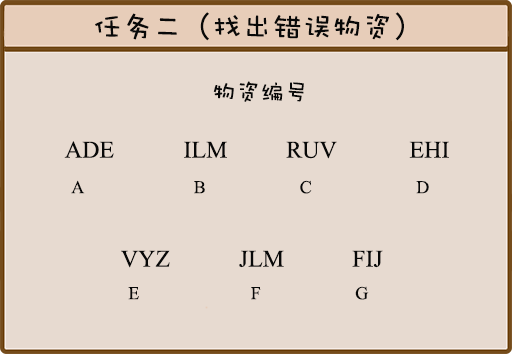
<style>
.page{position:relative;width:512px;height:354px;background:#e7dad0}
.page>*{position:absolute;margin:0}
.t1{font:30px "DFPWaWaW5";color:#080808}
.t2{font:24px "DFPWaWaW5";color:#080808}
.t3{font:24px "TimesNewRomanPSMT";color:#080808}
.t4{font:18px "TimesNewRomanPSMT";color:#080808}
</style>
<div class="page">
<p class="t1" style="left:95px;top:12px;width:309px;height:29px">任务二（找出错误物资）</p>
<p class="t2" style="left:213px;top:81px;width:91px;height:21px">物资编号</p>
<p class="t3" style="left:64px;top:141px;width:50px;height:17px">ADE</p>
<p class="t3" style="left:184px;top:141px;width:43px;height:17px">ILM</p>
<p class="t3" style="left:286px;top:141px;width:51px;height:18px">RUV</p>
<p class="t3" style="left:409px;top:141px;width:40px;height:17px">EHI</p>
<p class="t4" style="left:71px;top:180px;width:14px;height:14px">A</p>
<p class="t4" style="left:194px;top:181px;width:11px;height:13px">B</p>
<p class="t4" style="left:300px;top:180px;width:12px;height:14px">C</p>
<p class="t4" style="left:416px;top:181px;width:13px;height:13px">D</p>
<p class="t3" style="left:121px;top:250px;width:49px;height:18px">VYZ</p>
<p class="t3" style="left:239px;top:250px;width:45px;height:18px">JLM</p>
<p class="t3" style="left:352px;top:250px;width:31px;height:18px">FIJ</p>
<p class="t4" style="left:128px;top:287px;width:11px;height:13px">E</p>
<p class="t4" style="left:251px;top:287px;width:10px;height:13px">F</p>
<p class="t4" style="left:355px;top:286px;width:14px;height:14px">G</p>
</div>
